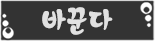
<style>
.page{position:relative;width:155px;height:41px;background:#333333}
.page>*{position:absolute;margin:0}
.t1{font:29.7px "KoreanKIES-R";color:#e1e1e1;font-weight:bold;scale:0.91 1}
</style>
<div class="page">
<p class="t1" style="left:42px;top:7px;width:71px;height:28px">바꾼다</p>
</div>
